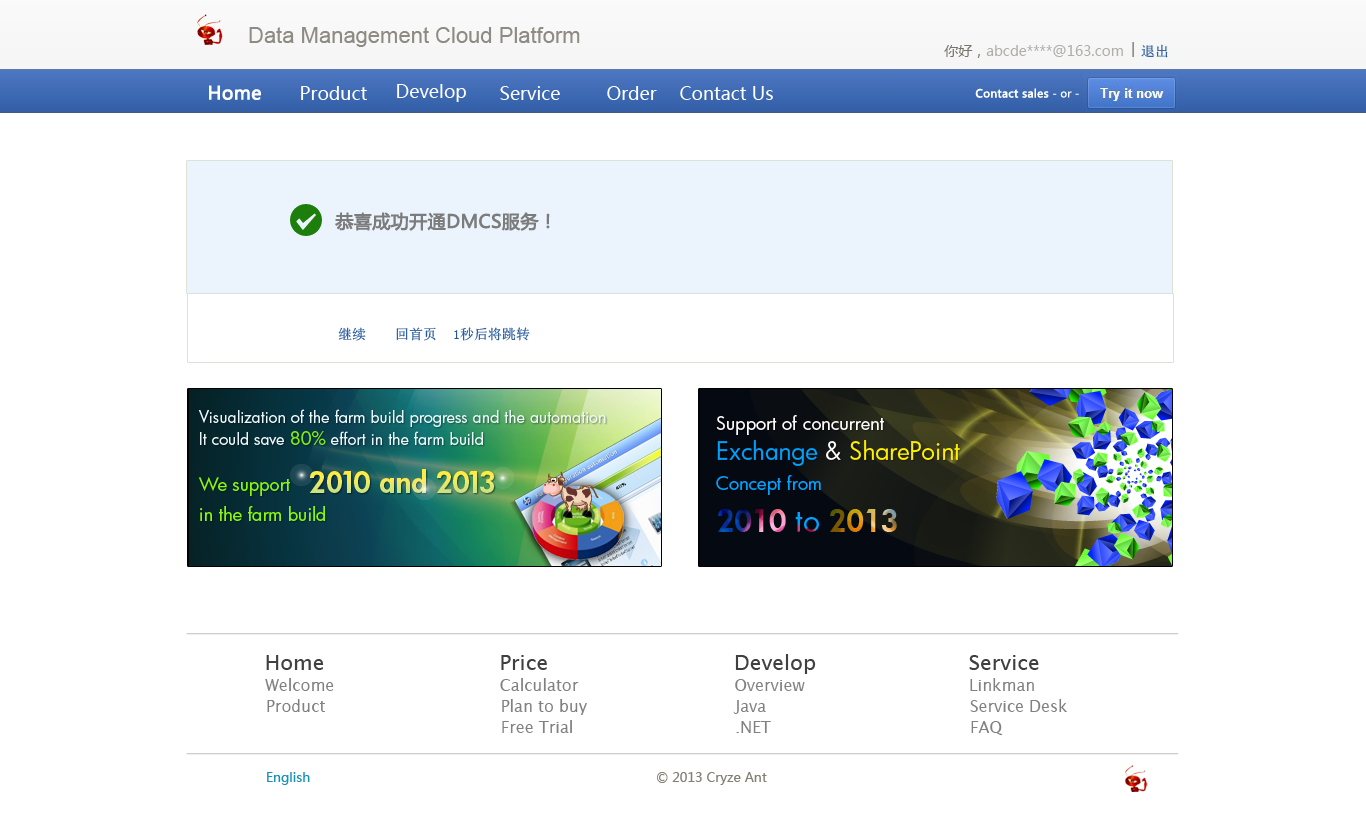
<style>
.page{position:relative;width:1366px;height:820px;background:#ffffff}
.page>*{position:absolute;margin:0}
.t1{font:22px "ArialMT";color:#8e8b82}
.t2{font:14px "MicrosoftYaHei";color:#b0aea9}
.t3{font:14px "MicrosoftYaHei";color:#77746b}
.t4{font:14px "MicrosoftYaHei"}
.t5{font:14px "SimSun";color:#225799}
.t6{font:18px "MicrosoftYaHei";color:#ffffff;font-weight:bold}
.t7{font:18px "MicrosoftYaHei";color:#ffffff}
.t8{font:11px "MicrosoftYaHei";color:#ffffff;font-weight:bold}
.t9{font:11px "MicrosoftYaHei";color:#ffffff}
.t10{font:18px "MicrosoftYaHei";color:#7c7c7c;font-weight:bold}
.t11{font:21px "LucidaSans";color:#404040}
.t12{font:21px "LucidaSans";color:#3f3f3f}
.t13{font:16px "LucidaSans";color:#818181}
.t14{font:13px "MicrosoftYaHei";color:#1791b8}
.t15{font:13px "MicrosoftYaHei";color:#827f74}
</style>
<div class="page">
<p class="t1" style="left:249px;top:27px;width:331px;height:20px">Data Management Cloud Platform</p>
<p class="t2" style="left:944px;top:45px;width:179px;height:13px"><span class="t3">你好，</span>abcde****@163.com</p>
<p class="t4" style="left:1132px;top:42px;width:2px;height:15px">|</p>
<p class="t5" style="left:1141px;top:44px;width:27px;height:14px">退出</p>
<p class="t6" style="left:209px;top:85px;width:52px;height:15px">Home</p>
<p class="t7" style="left:301px;top:86px;width:66px;height:14px">Product</p>
<p class="t7" style="left:397px;top:84px;width:69px;height:18px">Develop</p>
<p class="t7" style="left:500px;top:86px;width:60px;height:14px">Service</p>
<p class="t7" style="left:607px;top:86px;width:50px;height:14px">Order</p>
<p class="t7" style="left:680px;top:86px;width:93px;height:14px">Contact Us</p>
<p class="t8" style="left:975px;top:88px;width:104px;height:10px">Contact sales<span class="t9"> - or -</span></p>
<p class="t10" style="left:335px;top:212px;width:215px;height:19px">恭喜成功开通DMCS服务！</p>
<p class="t5" style="left:338px;top:327px;width:28px;height:14px">继续</p>
<p class="t5" style="left:396px;top:327px;width:40px;height:14px">回首页</p>
<p class="t5" style="left:454px;top:327px;width:76px;height:14px">1秒后将跳转</p>
<p class="t11" style="left:735px;top:654px;width:81px;height:20px">Develop</p>
<p class="t11" style="left:266px;top:655px;width:58px;height:15px">Home</p>
<p class="t12" style="left:501px;top:655px;width:46px;height:15px">Price</p>
<p class="t12" style="left:969px;top:655px;width:70px;height:15px">Service</p>
<p class="t13" style="left:265px;top:678px;width:69px;height:13px">Welcome</p>
<p class="t13" style="left:500px;top:678px;width:79px;height:13px">Calculator</p>
<p class="t13" style="left:970px;top:678px;width:64px;height:13px">Linkman</p>
<p class="t13" style="left:735px;top:679px;width:70px;height:12px">Overview</p>
<p class="t13" style="left:267px;top:699px;width:58px;height:13px">Product</p>
<p class="t13" style="left:502px;top:699px;width:85px;height:16px">Plan to buy</p>
<p class="t13" style="left:733px;top:700px;width:33px;height:14px">Java</p>
<p class="t13" style="left:970px;top:699px;width:97px;height:13px">Service Desk</p>
<p class="t13" style="left:502px;top:720px;width:70px;height:13px">Free Trial</p>
<p class="t13" style="left:736px;top:721px;width:35px;height:12px">.NET</p>
<p class="t13" style="left:971px;top:721px;width:32px;height:15px">FAQ</p>
<p class="t14" style="left:267px;top:772px;width:43px;height:13px">English</p>
<p class="t15" style="left:657px;top:772px;width:110px;height:13px">© 2013 Cryze Ant</p>
</div>
